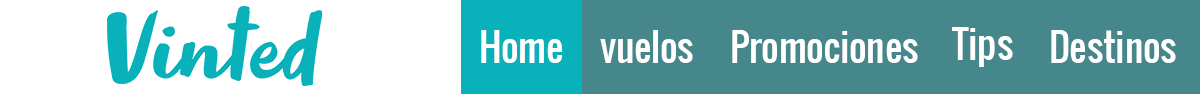
<style>
.page{position:relative;width:1200px;height:94px;background:#46878b}
.page>*{position:absolute;margin:0}
.t1{font:37.5px "Oswald-Regular";color:#ffffff}
</style>
<div class="page">
<p class="t1" style="left:481px;top:30px;width:82px;height:33px">Home</p>
<p class="t1" style="left:600px;top:30px;width:93px;height:33px">vuelos</p>
<p class="t1" style="left:732px;top:30px;width:186px;height:33px">Promociones</p>
<p class="t1" style="left:952px;top:27px;width:61px;height:40px">Tips</p>
<p class="t1" style="left:1051px;top:30px;width:125px;height:33px">Destinos</p>
</div>
